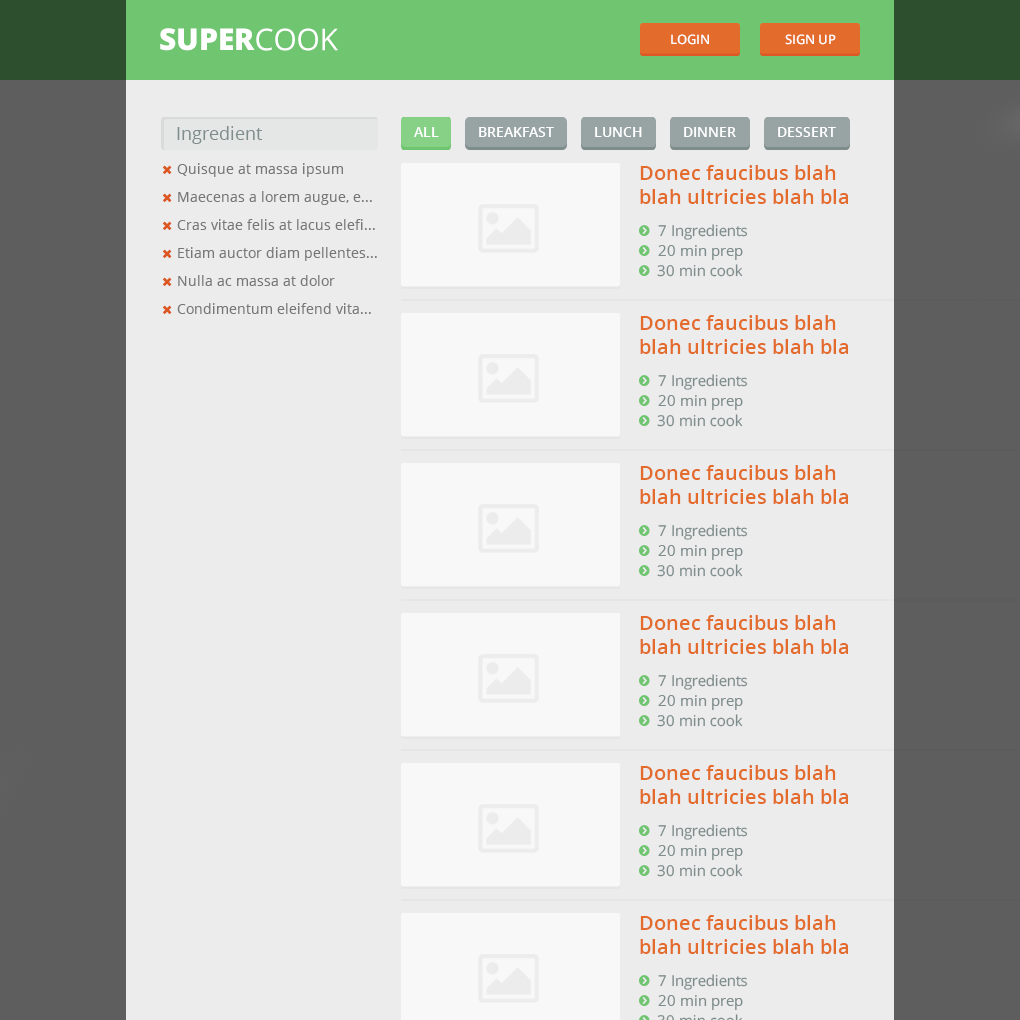
<style>
.page{position:relative;width:1020px;height:1020px;background:#ececec}
.page>*{position:absolute;margin:0}
.t1{font:30px "OpenSans-Extrabold";color:#ffffff}
.t2{font:30px "OpenSans";color:#ffffff}
.t3{font:13px "OpenSans-Semibold";color:#ffffff}
.t4{font:18px "OpenSans";color:#7f8c8c}
.t5{font:14px "OpenSans-Semibold";color:#ffffff}
.t6{font:14px/28px "OpenSans";color:#777777}
.t7{font:20px/24px "OpenSans-Semibold";color:#e36b2c}
.t8{font:15px "OpenSans";color:#7f8c8c}
.t9{font:15.1px "OpenSans";color:#7f8c8c}
</style>
<div class="page">
<p class="t1" style="left:160px;top:28px;width:95px;height:23px">SUPER</p>
<p class="t2" style="left:256px;top:28px;width:82px;height:23px">COOK</p>
<p class="t3" style="left:671px;top:34px;width:38px;height:11px">LOGIN</p>
<p class="t3" style="left:785px;top:34px;width:51px;height:11px">SIGN UP</p>
<p class="t4" style="left:177px;top:126px;width:86px;height:18px">Ingredient</p>
<p class="t5" style="left:414px;top:127px;width:25px;height:10px">ALL</p>
<p class="t5" style="left:479px;top:127px;width:75px;height:10px">BREAKFAST</p>
<p class="t5" style="left:595px;top:127px;width:47px;height:10px">LUNCH</p>
<p class="t5" style="left:684px;top:127px;width:52px;height:10px">DINNER</p>
<p class="t5" style="left:778px;top:127px;width:58px;height:10px">DESSERT</p>
<p class="t6" style="left:177px;top:163px;width:200px;height:151px">Quisque at massa ipsum <br>Maecenas a lorem augue, e... <br>Cras vitae felis at lacus elefi... <br>Etiam auctor diam pellentes...<br>Nulla ac massa at dolor <br>Condimentum eleifend vita...</p>
<p class="t7" style="left:640px;top:165px;width:208px;height:39px">Donec faucibus blah blah ultricies blah bla congue blah...</p>
<p class="t8" style="left:658px;top:224px;width:90px;height:16px">7 Ingredients</p>
<p class="t8" style="left:658px;top:245px;width:85px;height:15px">20 min prep</p>
<p class="t9" style="left:657px;top:264px;width:86px;height:13px">30 min cook</p>
<p class="t7" style="left:640px;top:315px;width:208px;height:39px">Donec faucibus blah blah ultricies blah bla congue blah...</p>
<p class="t8" style="left:658px;top:374px;width:90px;height:16px">7 Ingredients</p>
<p class="t8" style="left:658px;top:395px;width:85px;height:15px">20 min prep</p>
<p class="t9" style="left:657px;top:414px;width:86px;height:13px">30 min cook</p>
<p class="t7" style="left:640px;top:465px;width:208px;height:39px">Donec faucibus blah blah ultricies blah bla congue blah...</p>
<p class="t8" style="left:658px;top:524px;width:90px;height:16px">7 Ingredients</p>
<p class="t8" style="left:658px;top:545px;width:85px;height:15px">20 min prep</p>
<p class="t9" style="left:657px;top:564px;width:86px;height:13px">30 min cook</p>
<p class="t7" style="left:640px;top:615px;width:208px;height:39px">Donec faucibus blah blah ultricies blah bla congue blah...</p>
<p class="t8" style="left:658px;top:674px;width:90px;height:16px">7 Ingredients</p>
<p class="t8" style="left:658px;top:695px;width:85px;height:15px">20 min prep</p>
<p class="t9" style="left:657px;top:714px;width:86px;height:13px">30 min cook</p>
<p class="t7" style="left:640px;top:765px;width:208px;height:39px">Donec faucibus blah blah ultricies blah bla congue blah...</p>
<p class="t8" style="left:658px;top:824px;width:90px;height:16px">7 Ingredients</p>
<p class="t8" style="left:658px;top:845px;width:85px;height:15px">20 min prep</p>
<p class="t9" style="left:657px;top:864px;width:86px;height:13px">30 min cook</p>
<p class="t7" style="left:640px;top:915px;width:208px;height:39px">Donec faucibus blah blah ultricies blah bla congue blah...</p>
<p class="t8" style="left:658px;top:974px;width:90px;height:16px">7 Ingredients</p>
<p class="t8" style="left:658px;top:995px;width:85px;height:15px">20 min prep</p>
</div>
